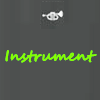
<style>
.page{position:relative;width:100px;height:100px;background:#4d504f}
.page>*{position:absolute;margin:0}
.t1{font:14.6px "SegoeScript";color:#86ff00;font-weight:bold}
</style>
<div class="page">
<p class="t1" style="left:5px;top:50px;width:92px;height:13px">Instrument</p>
</div>
